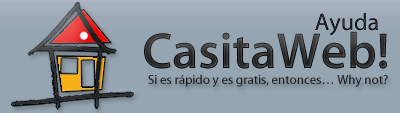
<style>
.page{position:relative;width:400px;height:113px;background:#95a5b2}
.page>*{position:absolute;margin:0}
.t1{font:24px "MyriadPro-Regular";color:#1d1d1d}
.t2{font:51px "MyriadPro-Semibold";color:#323232}
.t3{font:13px "MyriadPro-Regular";color:#1a1a1a}
</style>
<div class="page">
<p class="t1" style="left:315px;top:13px;width:63px;height:23px">Ayuda</p>
<p class="t2" style="left:144px;top:31px;width:243px;height:38px">CasitaWeb!</p>
<p class="t3" style="left:148px;top:74px;width:240px;height:13px">Si es rápido y es gratis, entonces… Why not?</p>
</div>
